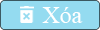
<style>
.page{position:relative;width:100px;height:30px;background:#94dbf0}
.page>*{position:absolute;margin:0}
.t1{font:24px "TimesNewRomanPSMT";color:#ffffff}
</style>
<div class="page">
<p class="t1" style="left:42px;top:7px;width:41px;height:16px">Xóa</p>
</div>
